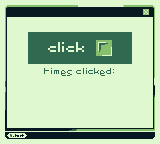
<style>
.page{position:relative;width:160px;height:144px;background:#e0f8cf}
.page>*{position:absolute;margin:0}
.t1{font:12.5px "Pixel";color:#e0f8cf}
.t2{font:8.4px "Pixel";color:#306850}
</style>
<div class="page">
<p class="t1" style="left:48px;top:42px;width:36px;height:10px">click</p>
<p class="t2" style="left:44px;top:68px;width:70px;height:8px">times clicked:</p>
</div>
